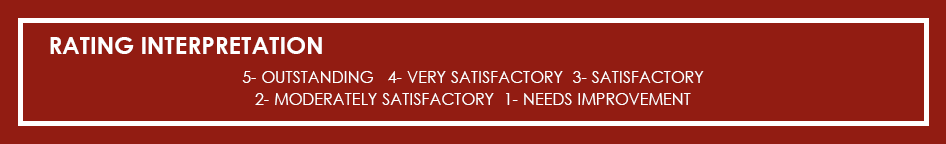
<style>
.page{position:relative;width:946px;height:144px;background:#921c12}
.page>*{position:absolute;margin:0}
.t1{font:24px "CenturyGothic-Bold";color:#ffffff;text-transform:uppercase}
.t2{font:16px/21.8px "CenturyGothic";color:#ffffff;text-transform:uppercase}
</style>
<div class="page">
<p class="t1" style="left:50px;top:37px;width:272px;height:17px">rating interpretation</p>
<p class="t2" style="left:242px;top:71px;width:462px;height:34px;text-align:center">5- Outstanding   4- very satisfactory  3- satisfactory<br>2- moderately satisfactory  1- needs improvement</p>
</div>
